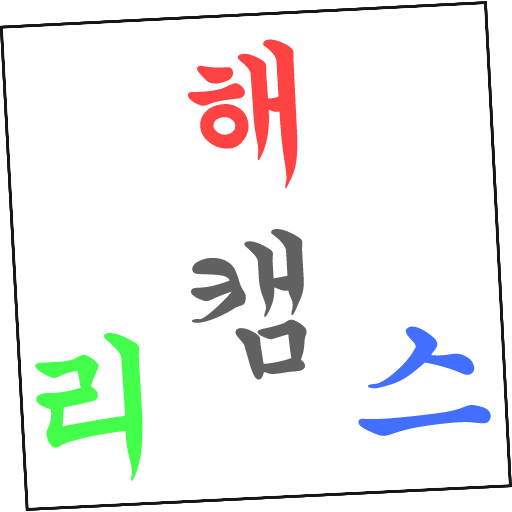
<style>
.page{position:relative;width:512px;height:512px;background:#ffffff}
.page>*{position:absolute;margin:0}
.t1{font:154px "GungsuhChe";color:#ff4343;font-weight:bold}
.t2{font:154px "GungsuhChe";color:#616161;font-weight:bold}
.t3{font:154px "GungsuhChe";color:#436fff;font-weight:bold}
.t4{font:154px "GungsuhChe";color:#43ff4c;font-weight:bold}
</style>
<div class="page">
<p class="t1" style="left:187px;top:39px;width:111px;height:150px;rotate:-3deg">해</p>
<p class="t2" style="left:191px;top:229px;width:116px;height:151px;rotate:-3deg">캠</p>
<p class="t3" style="left:358px;top:326px;width:133px;height:110px;rotate:-3deg">스</p>
<p class="t4" style="left:35px;top:333px;width:108px;height:148px;rotate:-3deg">리</p>
</div>
